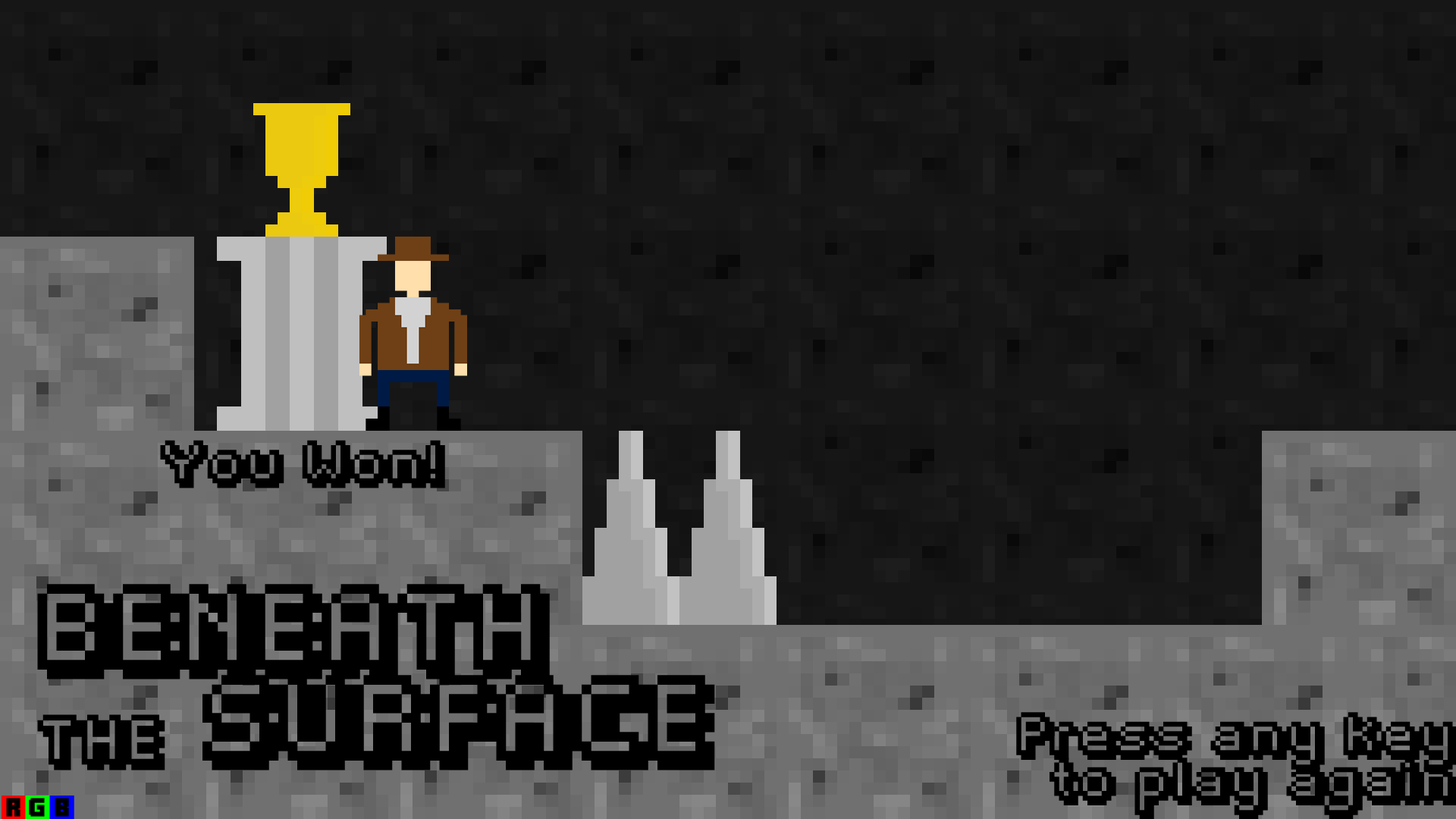
<style>
.page{position:relative;width:1456px;height:819px;background:#161616}
.page>*{position:absolute;margin:0}
.t1{font:37.9px "Fipps-Regular";color:#000000}
.t2{font:75.8px "Fipps-Regular";color:#000000}
.t3{font:44.2px "Fipps-Regular";color:#000000}
</style>
<div class="page">
<p class="t1" style="left:160px;top:440px;width:285px;height:48px">You Won!</p>
<p class="t2" style="left:37px;top:584px;width:678px;height:186px">BENEATH<br><span class="t3">THE</span> SURFACE</p>
<p class="t1" style="left:1016px;top:712px;width:441px;height:108px;text-align:right">Press any key<br>to play again</p>
</div>
